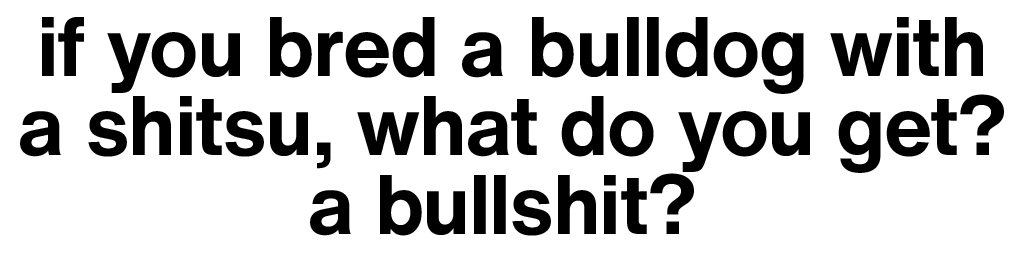
<style>
.page{position:relative;width:1024px;height:256px;background:#ffffff}
.page>*{position:absolute;margin:0}
.t1{font:83px/79px "HelveticaNowText-Bold";color:#000000}
</style>
<div class="page">
<p class="t1" style="left:20px;top:17px;width:984px;height:219px;text-align:center">if you bred a bulldog with<br>a shitsu, what do you get?<br>a bullshit?</p>
</div>
